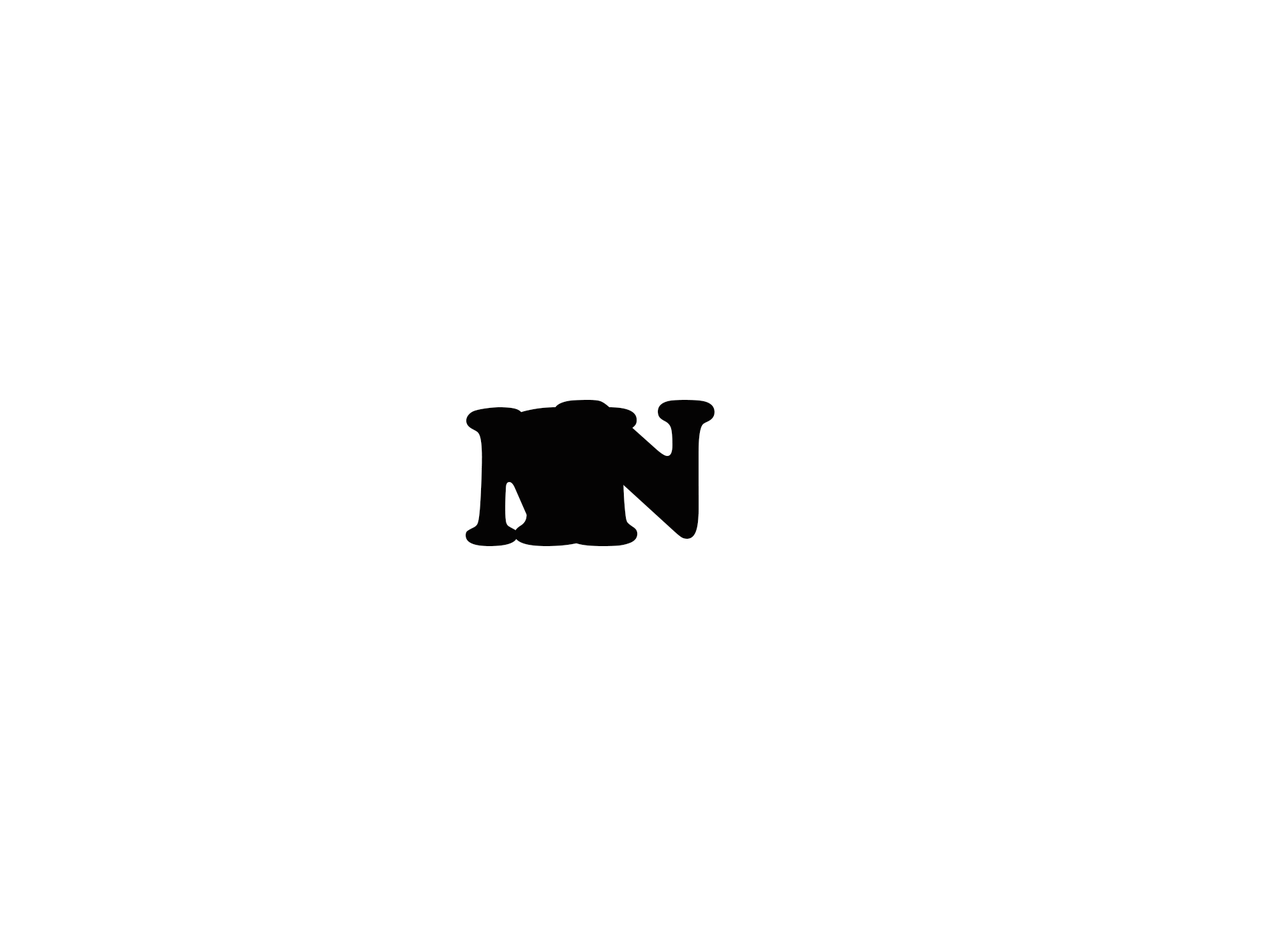
<style>
.page{position:relative;width:1261px;height:946px;background:#ffffff}
.page>*{position:absolute;margin:0}
.t1{font:200.2px "CooperBlack";color:#040303}
</style>
<div class="page">
<p class="t1" style="left:553px;top:400px;width:162px;height:138px">N</p>
<p class="t1" style="left:465px;top:407px;width:173px;height:139px">M</p>
<p class="t1" style="left:512px;top:407px;width:78px;height:139px">I</p>
</div>
